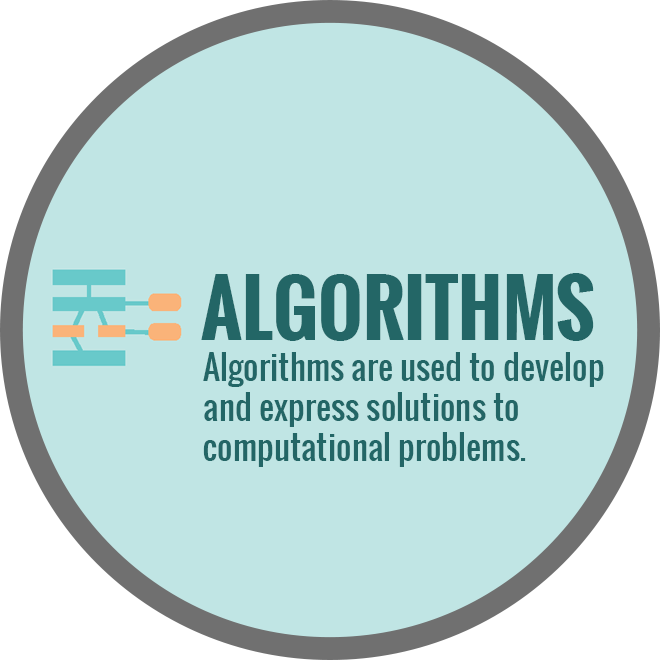
<style>
.page{position:relative;width:660px;height:660px;background:#c0e5e4}
.page>*{position:absolute;margin:0}
.t1{font:75px "Oswald-Bold";color:#236666}
.t2{font:33.3px "Oswald-Regular";color:#236666}
</style>
<div class="page">
<p class="t1" style="left:201px;top:273px;width:393px;height:68px">ALGORITHMS</p>
<p class="t2" style="left:203px;top:352px;width:401px;height:115px">Algorithms are used to develop<br>and express solutions to<br>computational problems.</p>
</div>
